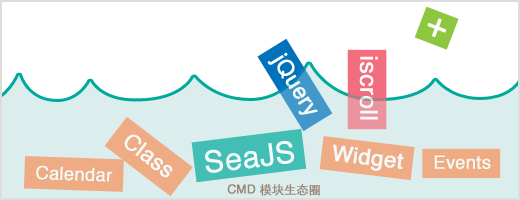
<style>
.page{position:relative;width:520px;height:200px;background:#ffffff}
.page>*{position:absolute;margin:0}
.t1{font:36px "Helvetica";color:#ffffff;font-weight:bold}
.t2{font:22px "Helvetica";color:#ffffff;font-weight:bold}
.t3{font:24px "Helvetica";color:#ffffff;font-weight:bold}
.t4{font:30px "Helvetica";color:#ffffff;font-weight:bold}
.t5{font:18px "Helvetica";color:#ffffff;font-weight:bold}
.t6{font:12px "STHeitiSC-Light";color:#998675;font-weight:bold}
.t7{font:12px "Helvetica";color:#998675;font-weight:bold}
</style>
<div class="page">
<p class="t1" style="left:427px;top:18px;width:20px;height:20px;rotate:21deg">+</p>
<p class="t2" style="left:267px;top:52px;width:51px;height:63px;rotate:58deg">jQuery</p>
<p class="t3" style="left:359px;top:56px;width:19px;height:64px;rotate:90deg">iscroll</p>
<p class="t2" style="left:124px;top:134px;width:49px;height:44px;rotate:37deg">Class</p>
<p class="t4" style="left:205px;top:141px;width:90px;height:32px;rotate:-7deg">SeaJS</p>
<p class="t2" style="left:333px;top:144px;width:71px;height:27px;rotate:7deg">Widget</p>
<p class="t5" style="left:434px;top:155px;width:57px;height:14px">Events</p>
<p class="t5" style="left:36px;top:165px;width:77px;height:17px;rotate:2deg">Calendar</p>
<p class="t6" style="left:227px;top:184px;width:93px;height:12px"><span class="t7">CMD </span>模块生态圈</p>
</div>
